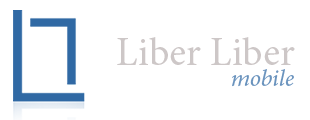
<style>
.page{position:relative;width:310px;height:120px;background:#ffffff}
.page>*{position:absolute;margin:0}
.t1{font:40px "MinionPro-Regular";color:#cdc7c7}
.t2{font:24px "MinionPro-It";color:#6a93bd}
</style>
<div class="page">
<p class="t1" style="left:117px;top:37px;width:178px;height:28px">Liber Liber</p>
<p class="t2" style="left:232px;top:69px;width:62px;height:18px">mobile</p>
</div>
